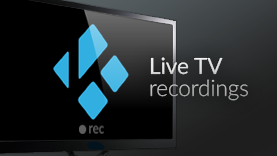
<style>
.page{position:relative;width:277px;height:156px;background:#000000}
.page>*{position:absolute;margin:0}
.t1{font:22.4px/22px "Lato-Light";color:#e3e3e3}
.t2{font:22.4px/22px "Lato-Regular";color:#e3e3e3}
</style>
<div class="page">
<p class="t1" style="left:150px;top:57px;width:98px;height:44px"><span class="t2">Live TV <br></span>recordings</p>
</div>
